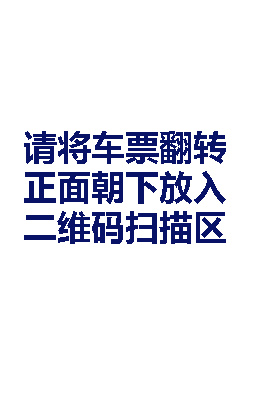
<style>
.page{position:relative;width:256px;height:400px;background:#ffffff}
.page>*{position:absolute;margin:0}
.t1{font:33.3px "MicrosoftYaHei-Bold";color:#081367}
</style>
<div class="page">
<p class="t1" style="left:24px;top:131px;width:202px;height:113px">请将车票翻转<br>正面朝下放入<br>二维码扫描区</p>
</div>
